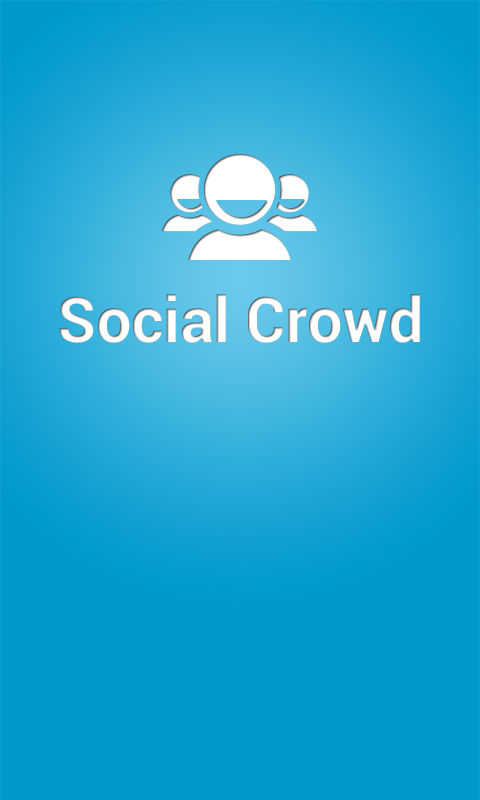
<style>
.page{position:relative;width:480px;height:800px;background:#0099cc}
.page>*{position:absolute;margin:0}
.t1{font:62.6px "Roboto-Bold";color:#ffffff}
</style>
<div class="page">
<p class="t1" style="left:59px;top:294px;width:361px;height:49px">Social Crowd</p>
</div>
